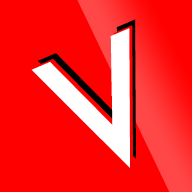
<style>
.page{position:relative;width:192px;height:192px;background:#ff0000}
.page>*{position:absolute;margin:0}
.t1{font:158.2px "Futura-Medium";color:#ffffff}
.t2{font:158.2px "Futura-Medium"}
</style>
<div class="page">
<p class="t1" style="left:31px;top:28px;width:99px;height:140px;rotate:-23deg">V</p>
<p class="t1" style="left:34px;top:25px;width:99px;height:140px;rotate:-23deg">V</p>
<p class="t2" style="left:37px;top:19px;width:99px;height:140px;rotate:-23deg">V</p>
</div>
